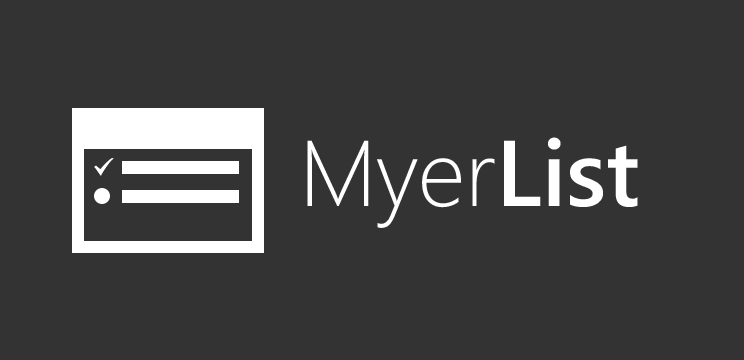
<style>
.page{position:relative;width:744px;height:360px;background:#333333}
.page>*{position:absolute;margin:0}
.t1{font:93.2px "SegoeWP-Light";color:#ffffff}
.t2{font:93.2px "SegoeWP-Semibold";color:#ffffff}
</style>
<div class="page">
<p class="t1" style="left:307px;top:137px;width:331px;height:91px">Myer<span class="t2">List</span></p>
</div>
